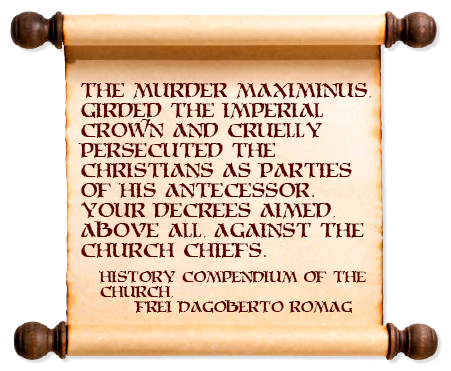
<style>
.page{position:relative;width:451px;height:371px;background:#ffffff}
.page>*{position:absolute;margin:0}
.t1{font:16.7px "MoriaCitadel";color:#580000}
.t2{font:12.5px "MoriaCitadel";color:#580000}
</style>
<div class="page">
<p class="t1" style="left:78px;top:83px;width:293px;height:175px">The murder Maximinus,<br>girded the imperial<br>crown and cruelly<br>persecuted the<br>christians as parties<br>of his antecessor.<br>Your decrees aimed,<br>above all, against the<br>church chiefs.</p>
<p class="t2" style="left:99px;top:270px;width:267px;height:43px">History Compendium of the<br>Church,<br> Frei Dagoberto Romag</p>
</div>
